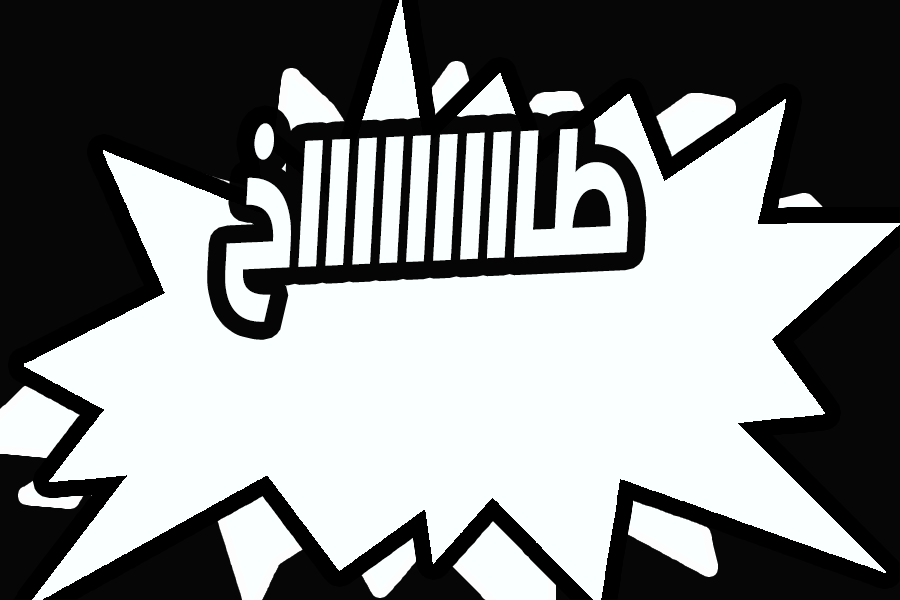
<style>
.page{position:relative;width:900px;height:600px;background:#faffff}
.page>*{position:absolute;margin:0}
.t1{font:179.8px "Emad-DianaeXtra-Regular";color:#faffff;scale:0.53 1}
</style>
<div class="page">
<p class="t1" style="left:225px;top:123px;width:404px;height:199px;rotate:-3deg">طاااااااااخ</p>
</div>
